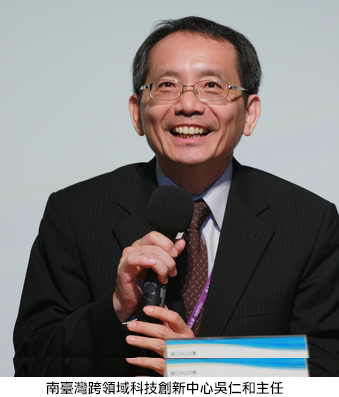
<style>
.page{position:relative;width:339px;height:397px}
.page>*{position:absolute;margin:0}
.t1{font:14px "LiHeiPro";color:#000000}
</style>
<div class="page">
<p class="t1" style="left:46px;top:381px;width:237px;height:14px">南臺灣跨領域科技創新中心吳仁和主任</p>
</div>
